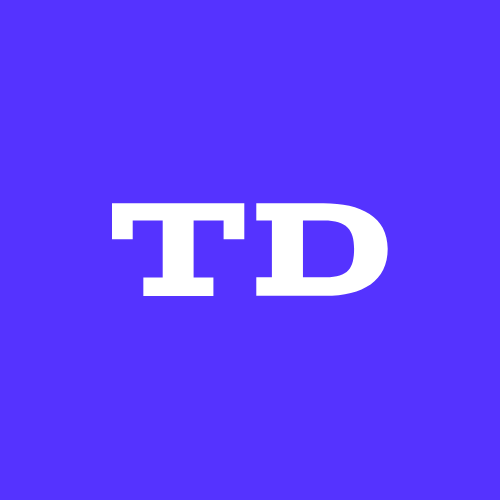
<style>
.page{position:relative;width:500px;height:500px;background:#5533ff}
.page>*{position:absolute;margin:0}
.t1{font:150px "Acknowledgement";color:#ffffff}
</style>
<div class="page">
<p class="t1" style="left:112px;top:203px;width:276px;height:93px">td</p>
</div>
